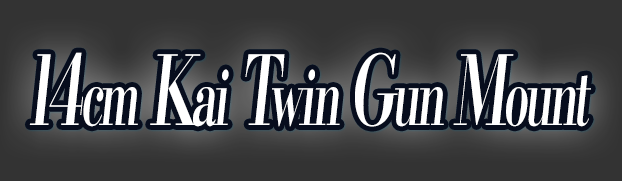
<style>
.page{position:relative;width:622px;height:181px;background:#333333}
.page>*{position:absolute;margin:0}
.t1{font:76.8px "KochoStd-Heavy";letter-spacing:-0.08em;color:#ffffff;font-style:italic;scale:0.6 1}
.t2{font:96px "KochoStd-Heavy";letter-spacing:-0.08em;color:#ffffff;font-style:italic;scale:0.6 1}
</style>
<div class="page">
<p class="t1" style="left:29px;top:52px;width:562px;height:75px"><span class="t2">14</span>cm<span class="t2"> K</span>ai<span class="t2"> T</span>win <span class="t2">G</span>un <span class="t2">M</span>ount</p>
</div>
